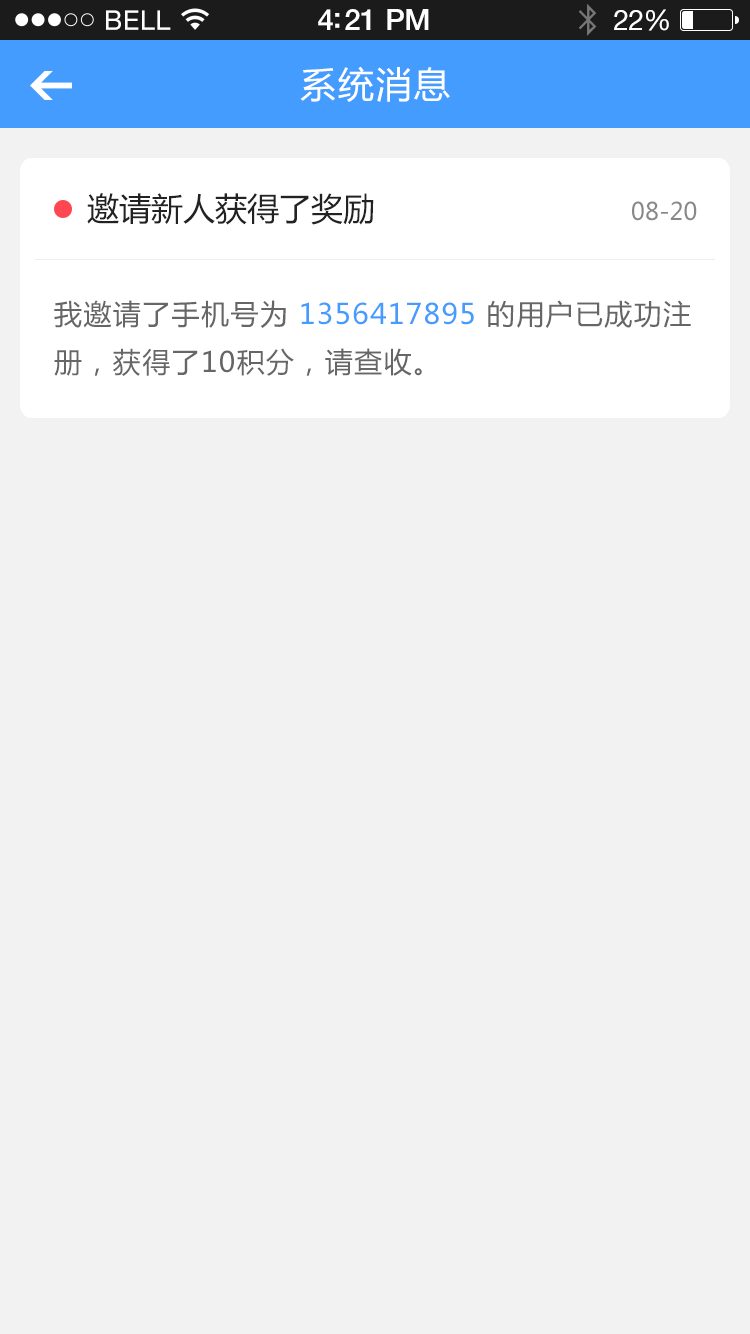
<style>
.page{position:relative;width:750px;height:1334px;background:#f2f2f2}
.page>*{position:absolute;margin:0}
.t1{font:36px "MicrosoftYaHei";letter-spacing:0.05em;color:#ffffff}
.t2{font:32px "MicrosoftYaHei";color:#222222}
.t3{font:24px "MicrosoftYaHei";color:#888888}
.t4{font:28px/48px "MicrosoftYaHei";letter-spacing:0.05em;color:#666666}
.t5{font:28px/48px "MicrosoftYaHei";letter-spacing:0.05em;color:#449cff}
</style>
<div class="page">
<p class="t1" style="left:300px;top:66px;width:150px;height:36px">系统消息</p>
<p class="t2" style="left:87px;top:193px;width:287px;height:32px">邀请新人获得了奖励</p>
<p class="t3" style="left:632px;top:201px;width:65px;height:20px">08-20</p>
<p class="t4" style="left:54px;top:300px;width:637px;height:76px">我邀请了手机号为 <span class="t5">1356417895</span> 的用户已成功注<br>册，获得了10积分，请查收。</p>
</div>
